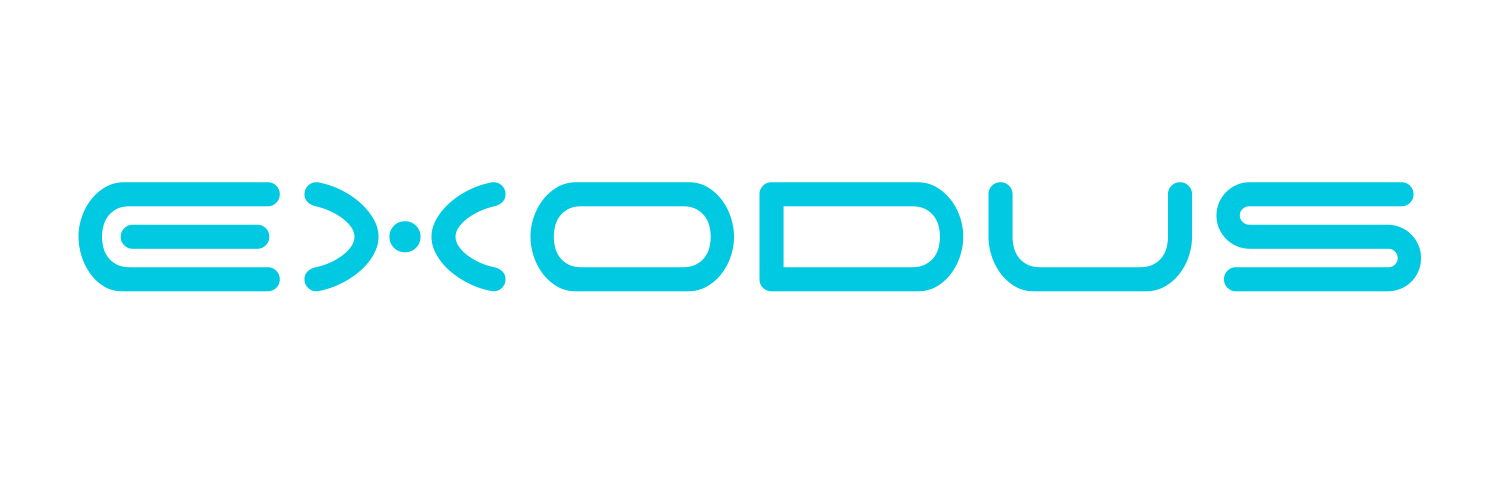
<style>
.page{position:relative;width:1500px;height:500px;background:#ffffff}
.page>*{position:absolute;margin:0}
.t1{font:250px "SpaceAge";color:#00c9e1}
</style>
<div class="page">
<p class="t1" style="left:78px;top:182px;width:1343px;height:110px">EXODUS</p>
</div>
